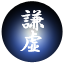
<style>
.page{position:relative;width:64px;height:64px;background:#ffffff}
.page>*{position:absolute;margin:0}
.t1{font:24px "HGGyoshotai";color:#ffffff}
</style>
<div class="page">
<p class="t1" style="left:21px;top:10px;width:23px;height:21px">謙</p>
<p class="t1" style="left:21px;top:10px;width:23px;height:21px">謙</p>
<p class="t1" style="left:20px;top:30px;width:22px;height:22px">虚</p>
<p class="t1" style="left:20px;top:30px;width:22px;height:22px">虚</p>
</div>
